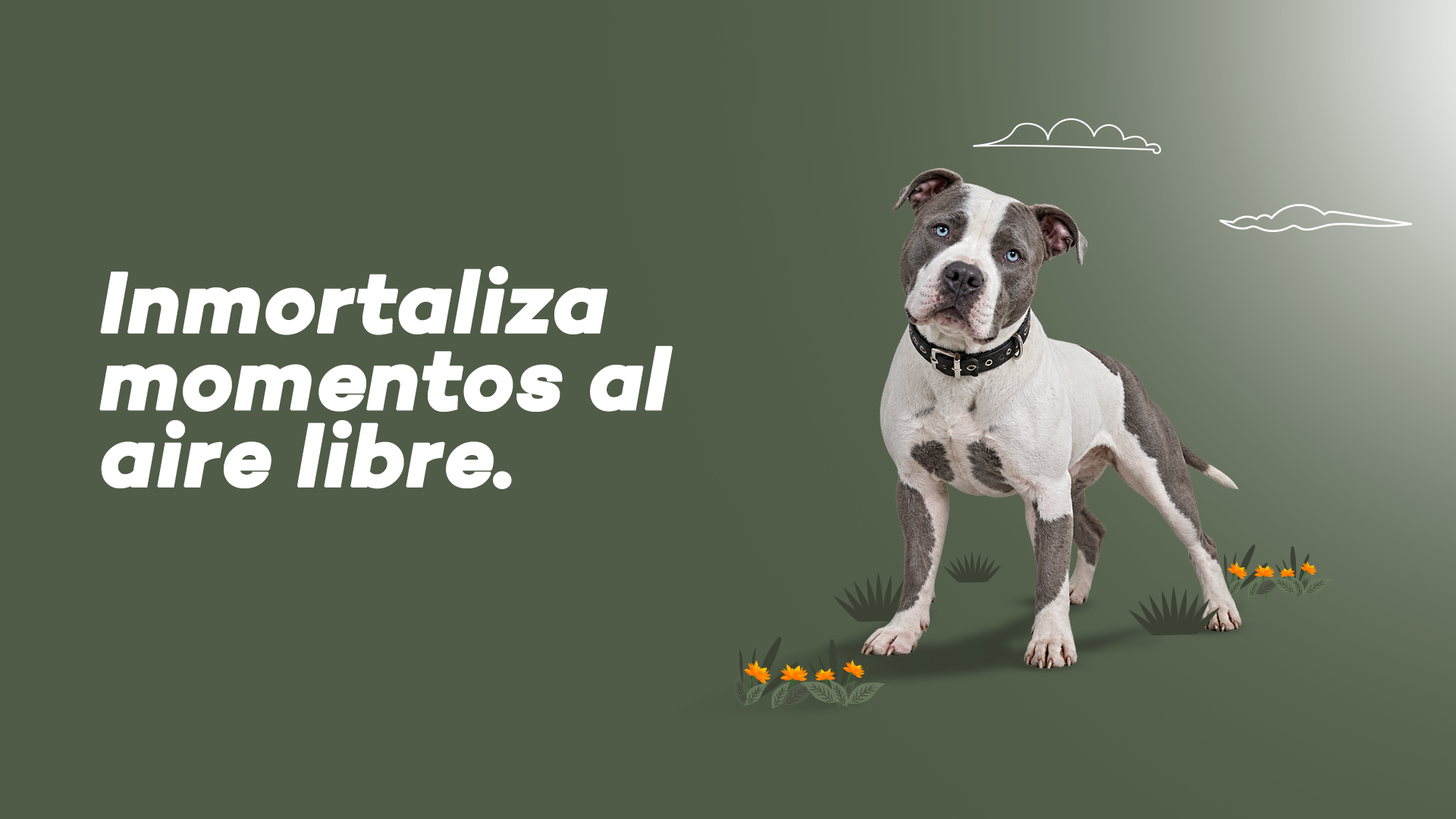
<style>
.page{position:relative;width:1456px;height:819px;background:#505c47}
.page>*{position:absolute;margin:0}
.t1{font:87.2px/77px "Campton-BoldItalic";color:#ffffff;font-weight:bold}
</style>
<div class="page">
<p class="t1" style="left:99px;top:265px;width:574px;height:224px">Inmortaliza<br>momentos al<br>aire libre.</p>
</div>
